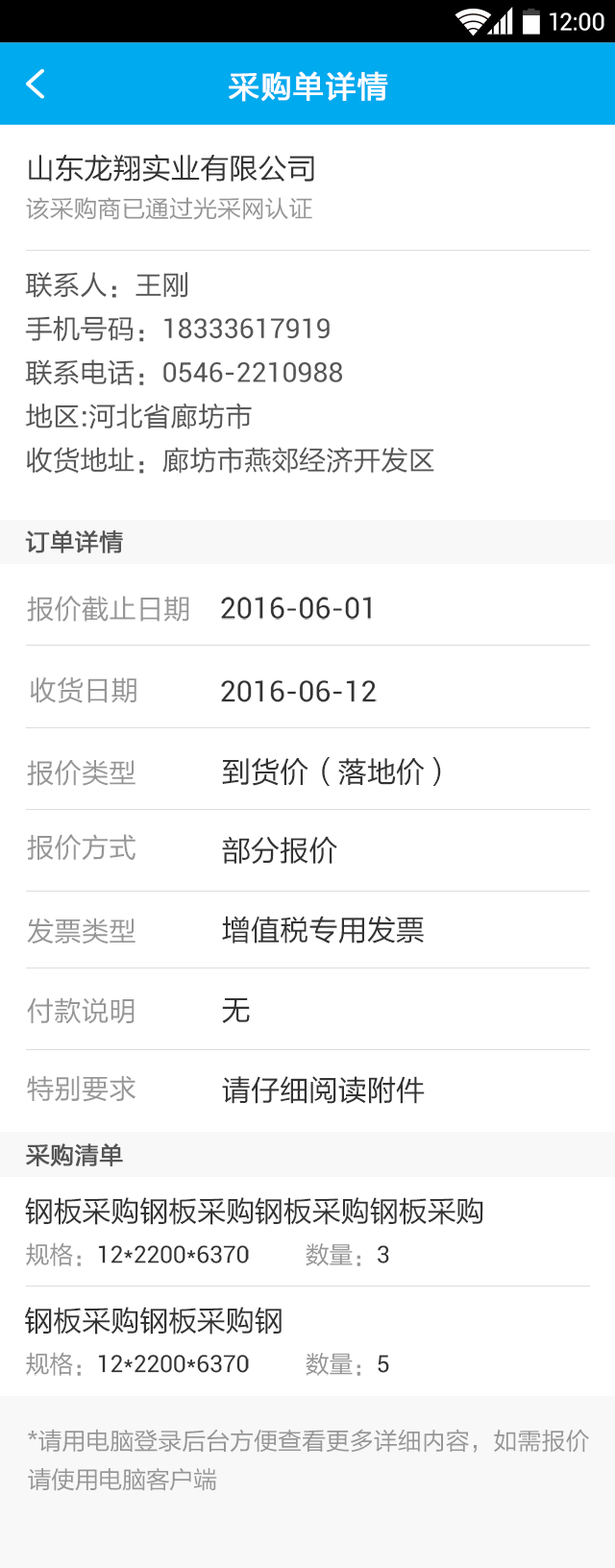
<style>
.page{position:relative;width:615px;height:1568px;background:#ffffff}
.page>*{position:absolute;margin:0}
.t1{font:23.9px "Roboto-Regular";color:#ffffff}
.t2{font:30.7px "FZLTHJW--GB1-0";letter-spacing:0.02em;color:#ffffff;font-weight:bold}
.t3{font:29px "FZLTHJW--GB1-0";color:#333333}
.t4{font:23.9px "FZLTHJW--GB1-0";color:#969696}
.t5{font:27.3px/43.8px "FZLTHJW--GB1-0";color:#555555}
.t6{font:27.3px/43.8px "Roboto-Regular";color:#555555}
.t7{font:23.9px "FZLTHJW--GB1-0";color:#555555;font-weight:bold}
.t8{font:27.3px "FZLTHJW--GB1-0";color:#969696}
.t9{font:29px "Roboto-Regular";color:#333333}
.t10{font:29px "FZLTHJW--GB1-0";letter-spacing:-0.01em;color:#333333;text-transform:uppercase}
.t11{font:23.9px "Roboto-Regular";letter-spacing:-0.01em;color:#333333;text-transform:uppercase}
.t12{font:23.9px "FZLTHJW--GB1-0";letter-spacing:-0.01em;color:#969696;text-transform:uppercase}
.t13{font:23.9px/38.7px "FZLTHJW--GB1-0";letter-spacing:-0.01em;color:#969696;text-transform:uppercase}
</style>
<div class="page">
<p class="t1" style="left:550px;top:12px;width:54px;height:19px">12:00</p>
<p class="t2" style="left:229px;top:71px;width:159px;height:31px">采购单详情</p>
<p class="t3" style="left:29px;top:154px;width:285px;height:28px">山东龙翔实业有限公司</p>
<p class="t4" style="left:26px;top:197px;width:286px;height:23px">该采购商已通过光采网认证</p>
<p class="t5" style="left:25px;top:272px;width:409px;height:202px">联系人：王刚<br>手机号码：<span class="t6">18333617919<br></span>联系电话：<span class="t6">0546-2210988<br></span>地区:河北省廊坊市<br>收货地址：廊坊市燕郊经济开发区</p>
<p class="t7" style="left:25px;top:530px;width:98px;height:23px">订单详情</p>
<p class="t8" style="left:27px;top:596px;width:162px;height:26px">报价截止日期</p>
<p class="t9" style="left:221px;top:597px;width:150px;height:23px">2016-06-01</p>
<p class="t8" style="left:30px;top:676px;width:106px;height:27px">收货日期</p>
<p class="t9" style="left:221px;top:680px;width:156px;height:22px">2016-06-12</p>
<p class="t8" style="left:27px;top:760px;width:108px;height:26px">报价类型</p>
<p class="t3" style="left:222px;top:757px;width:219px;height:29px">到货价（落地价）</p>
<p class="t8" style="left:27px;top:834px;width:108px;height:26px">报价方式</p>
<p class="t3" style="left:222px;top:836px;width:115px;height:29px">部分报价</p>
<p class="t8" style="left:27px;top:918px;width:108px;height:26px">发票类型</p>
<p class="t3" style="left:222px;top:916px;width:202px;height:27px">增值税专用发票</p>
<p class="t8" style="left:27px;top:997px;width:108px;height:27px">付款说明</p>
<p class="t3" style="left:222px;top:998px;width:28px;height:25px">无</p>
<p class="t8" style="left:27px;top:1075px;width:108px;height:27px">特别要求</p>
<p class="t3" style="left:222px;top:1076px;width:203px;height:28px">请仔细阅读附件</p>
<p class="t7" style="left:26px;top:1143px;width:97px;height:23px">采购清单</p>
<p class="t10" style="left:25px;top:1197px;width:458px;height:28px">钢板采购钢板采购钢板采购钢板采购</p>
<p class="t11" style="left:26px;top:1242px;width:223px;height:24px"><span class="t12">规格：</span>12*2200*6370</p>
<p class="t12" style="left:306px;top:1243px;width:83px;height:23px">数量：<span class="t11">3</span></p>
<p class="t10" style="left:25px;top:1307px;width:257px;height:28px">钢板采购钢板采购钢</p>
<p class="t11" style="left:26px;top:1352px;width:223px;height:24px"><span class="t12">规格：</span>12*2200*6370</p>
<p class="t12" style="left:306px;top:1353px;width:83px;height:23px">数量：<span class="t11">5</span></p>
<p class="t13" style="left:28px;top:1429px;width:561px;height:62px;text-align:justify">*请用电脑登录后台方便查看更多详细内容，如需报价请使用电脑客户端</p>
</div>
